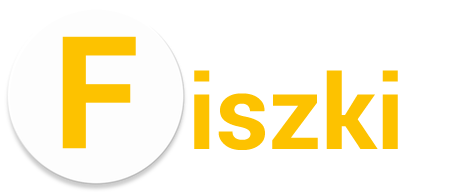
<style>
.page{position:relative;width:457px;height:192px;background:#ffffff}
.page>*{position:absolute;margin:0}
.t1{font:103px "Roboto-Bold";color:#fdc200}
</style>
<div class="page">
<p class="t1" style="left:194px;top:70px;width:204px;height:80px">iszki</p>
</div>
